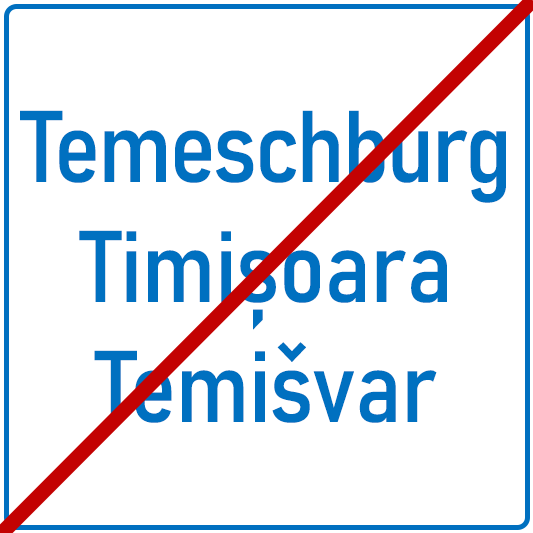
<style>
.page{position:relative;width:533px;height:533px;background:#ffffff}
.page>*{position:absolute;margin:0}
.t1{font:100px "Bahnschrift-SemiCondensed";letter-spacing:-0.01em;color:#0070c0}
.t2{font:100px "Bahnschrift-SemiCondensed";letter-spacing:-0.025em;color:#0070c0}
</style>
<div class="page">
<p class="t1" style="left:20px;top:110px;width:486px;height:313px;text-align:center"><span class="t2">Temeschburg<br></span>Timișoara<br>Temišvar</p>
</div>
